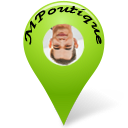
<style>
.page{position:relative;width:128px;height:128px;background:#ffffff}
.page>*{position:absolute;margin:0}
.t1{font:10px "LucidaCalligraphy-Italic";color:#000000}
</style>
<div class="page">
<p class="t1" style="left:25px;top:6px;width:77px;height:39px">MPoutique</p>
</div>
